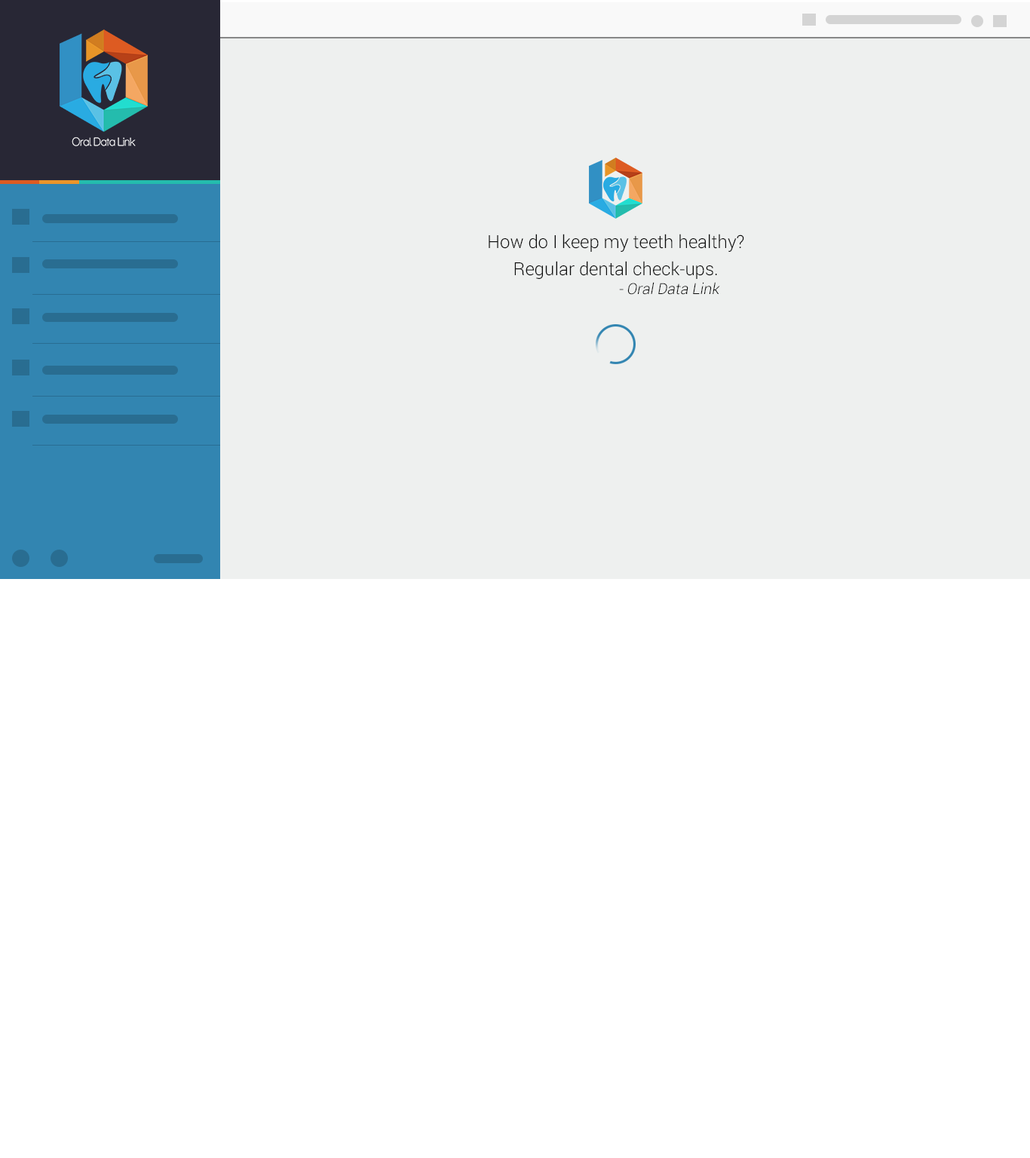
<style>
.page{position:relative;width:1030px;height:1158px;background:#ffffff}
.page>*{position:absolute;margin:0}
.t1{font:18.1px/27.1px "Roboto-Light";color:#0c0c0c}
.t2{font:15.1px "Roboto-Light";color:#0c0c0c;font-style:italic}
</style>
<div class="page">
<p class="t1" style="left:489px;top:234px;width:255px;height:45px;text-align:center">How do I keep my teeth healthy?<br>Regular dental check-ups.</p>
<p class="t2" style="left:619px;top:282px;width:101px;height:13px">- Oral Data Link</p>
</div>
